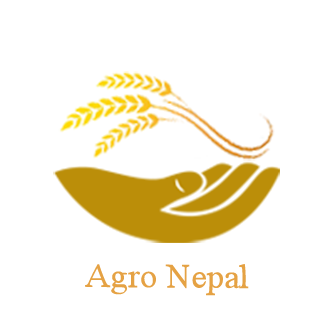
<style>
.page{position:relative;width:335px;height:327px;background:#ffffff}
.page>*{position:absolute;margin:0}
.t1{font:33.6px "TimesNewRomanPSMT";color:#e5a244}
</style>
<div class="page">
<p class="t1" style="left:85px;top:264px;width:164px;height:32px">Agro Nepal</p>
</div>
